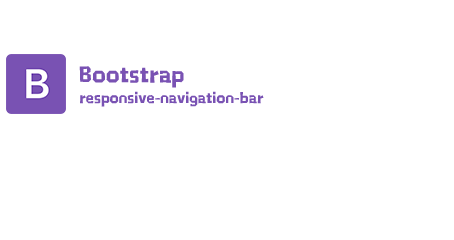
<style>
.page{position:relative;width:454px;height:240px;background:#ffffff}
.page>*{position:absolute;margin:0}
.t1{font:24px "HYZhuZiMuTouRenW";color:#7952b3}
.t2{font:16px "HYZhuZiMuTouRenW";color:#7952b3}
</style>
<div class="page">
<p class="t1" style="left:79px;top:66px;width:105px;height:22px">Bootstrap</p>
<p class="t2" style="left:80px;top:91px;width:184px;height:16px">responsive-navigation-bar</p>
</div>
